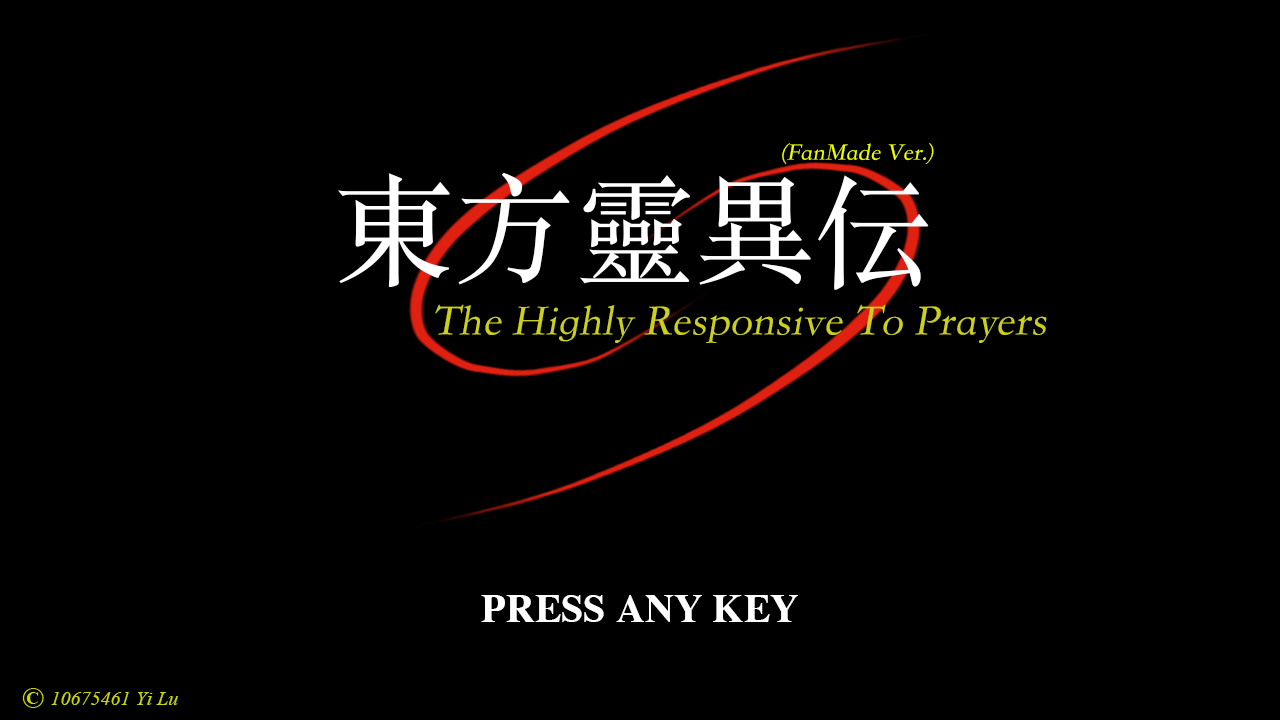
<style>
.page{position:relative;width:1280px;height:720px;background:#000000}
.page>*{position:absolute;margin:0}
.t1{font:24px "STSongti-TC-Regular";color:#f0ff00;font-style:italic}
.t2{font:120px "STSongti-TC-Regular";color:#ffffff}
.t3{font:44px "STSongti-TC-Regular";color:#cbd020;font-style:italic}
.t4{font:40px "Times-Bold";color:#ffffff}
.t5{font:20px "TimesNewRomanPS-ItalicMT";color:#cbd800}
</style>
<div class="page">
<p class="t1" style="left:782px;top:143px;width:152px;height:22px">(FanMade Ver.)</p>
<p class="t2" style="left:338px;top:172px;width:591px;height:118px">東方靈異伝</p>
<p class="t3" style="left:435px;top:304px;width:612px;height:39px">The Highly Responsive To Prayers</p>
<p class="t4" style="left:481px;top:595px;width:317px;height:27px">PRESS ANY KEY</p>
<p class="t5" style="left:51px;top:692px;width:127px;height:13px">10675461 Yi Lu</p>
</div>
